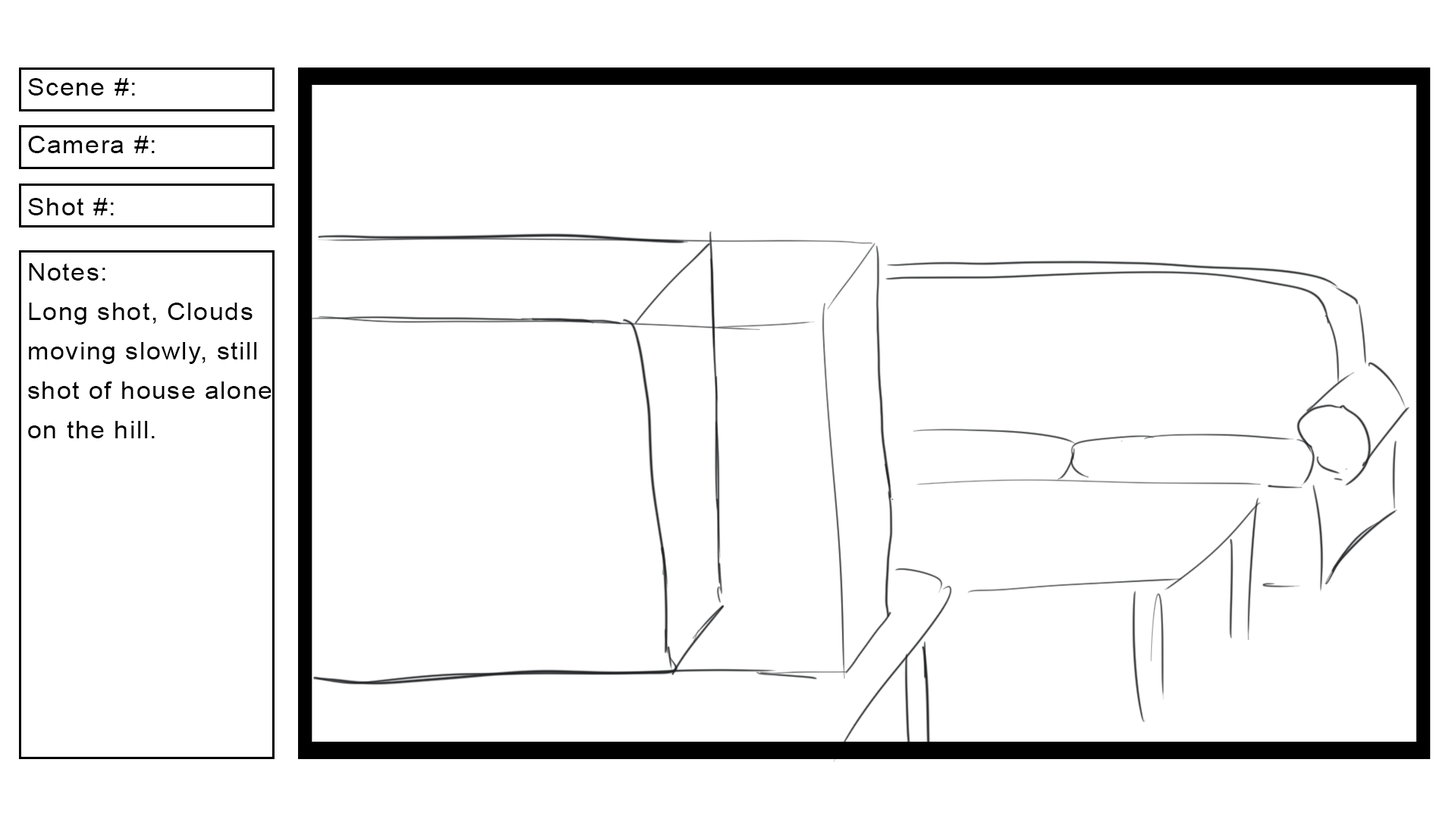
<style>
.page{position:relative;width:1456px;height:819px;background:#ffffff}
.page>*{position:absolute;margin:0}
.t1{font:24.2px "ArialMT";letter-spacing:0.04em;color:#000000;scale:1.07 1}
.t2{font:24.2px/39.4px "ArialMT";letter-spacing:0.04em;color:#000000;scale:1.07 1}
</style>
<div class="page">
<p class="t1" style="left:28px;top:78px;width:107px;height:18px">Scene #:</p>
<p class="t1" style="left:28px;top:136px;width:127px;height:17px">Camera #:</p>
<p class="t1" style="left:28px;top:198px;width:86px;height:17px">Shot #:</p>
<p class="t2" style="left:28px;top:263px;width:243px;height:175px">Notes:<br>Long shot, Clouds moving slowly, still shot of house alone on the hill.</p>
</div>
